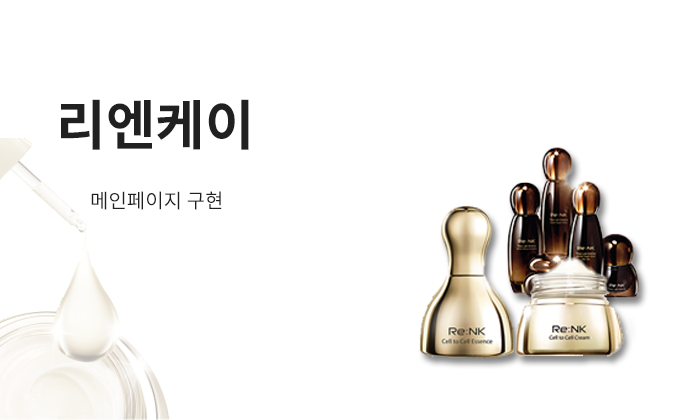
<style>
.page{position:relative;width:700px;height:420px;background:#ffffff}
.page>*{position:absolute;margin:0}
.t1{font:54px "NotoSansKR-Bold";color:#202020}
.t2{font:20px "NotoSansKR-Regular";color:#202020}
</style>
<div class="page">
<p class="t1" style="left:61px;top:99px;width:188px;height:51px">리엔케이</p>
<p class="t2" style="left:91px;top:191px;width:131px;height:19px">메인페이지 구현</p>
</div>
